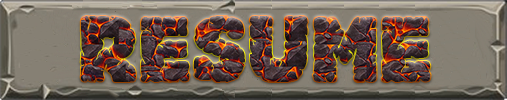
<style>
.page{position:relative;width:507px;height:100px}
.page>*{position:absolute;margin:0}
.t1{font:80px "JFRockSolid"}
</style>
<div class="page">
<p class="t1" style="left:80px;top:16px;width:351px;height:66px">Resume</p>
</div>
